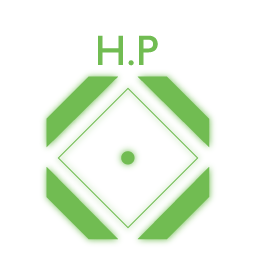
<style>
.page{position:relative;width:256px;height:256px;background:#ffffff}
.page>*{position:absolute;margin:0}
.t1{font:42.7px "GillSansMT";letter-spacing:0.01em;color:#71bc52}
</style>
<div class="page">
<p class="t1" style="left:98px;top:35px;width:60px;height:31px">H.P</p>
</div>
